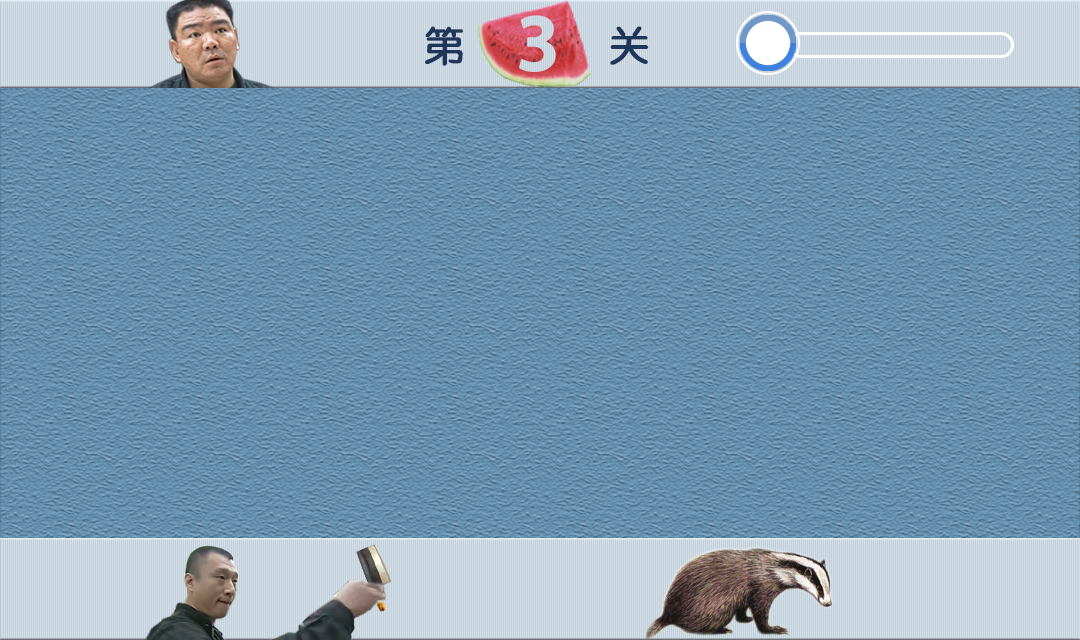
<style>
.page{position:relative;width:1080px;height:640px}
.page>*{position:absolute;margin:0}
.t1{font:40px "HGY3_CNKI";letter-spacing:0.5em;color:#1e365a;font-weight:bold}
</style>
<div class="page">
<p class="t1" style="left:425px;top:26px;width:224px;height:40px">第    关</p>
</div>
